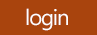
<style>
.page{position:relative;width:97px;height:35px;background:#a9440d}
.page>*{position:absolute;margin:0}
.t1{font:22px "LaoUI";letter-spacing:-0.05em;color:#fefefe}
</style>
<div class="page">
<p class="t1" style="left:26px;top:8px;width:42px;height:23px">login</p>
</div>
